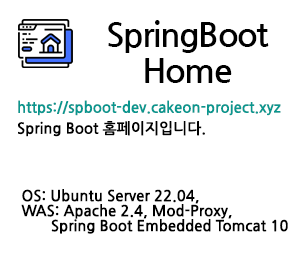
<style>
.page{position:relative;width:300px;height:280px;background:#ffffff}
.page>*{position:absolute;margin:0}
.t1{font:34px/36px "NanumGothicBold";letter-spacing:-0.04em;color:#000000}
.t2{font:15px "NanumGothicBold";color:#0a978f}
.t3{font:15px "NanumGothicBold";color:#000000}
.t4{font:15px/15px "NanumGothicBold";color:#000000}
</style>
<div class="page">
<p class="t1" style="left:108px;top:20px;width:161px;height:63px;text-align:center">SpringBoot<br>Home</p>
<p class="t2" style="left:18px;top:100px;width:263px;height:16px">https://spboot-dev.cakeon-project.xyz</p>
<p class="t3" style="left:18px;top:121px;width:187px;height:16px">Spring Boot 홈페이지입니다.</p>
<p class="t4" style="left:21px;top:189px;width:267px;height:45px">OS: Ubuntu Server 22.04, <br>WAS: Apache 2.4, Mod-Proxy,<br>       Spring Boot Embedded Tomcat 10</p>
</div>
